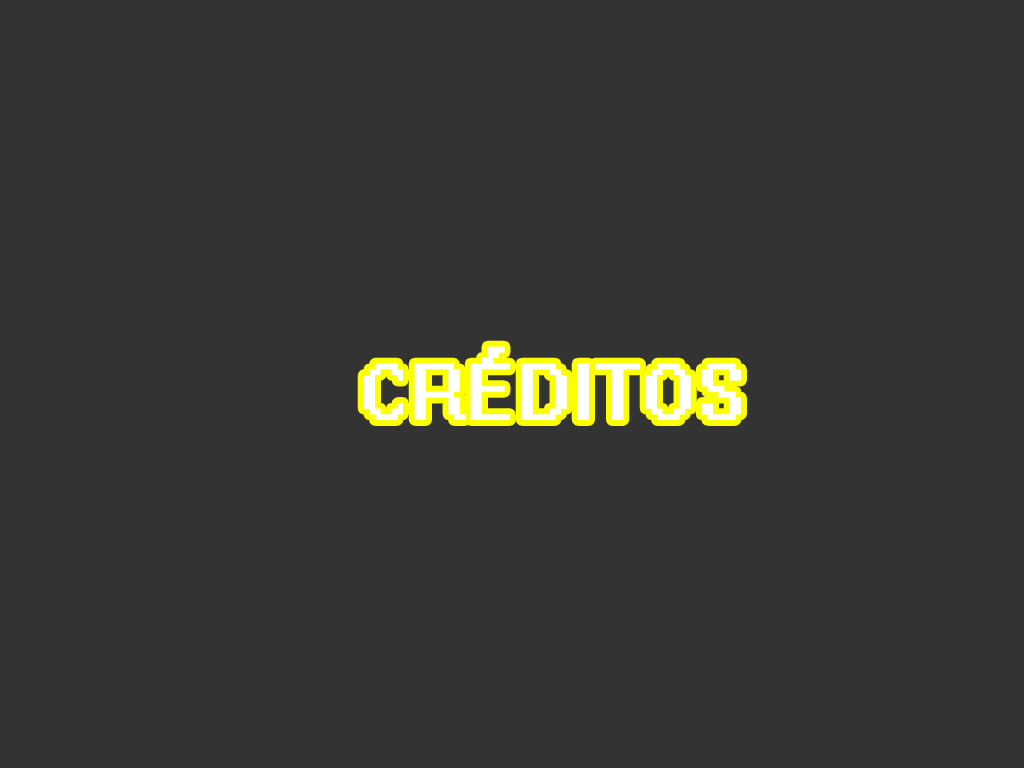
<style>
.page{position:relative;width:1024px;height:768px;background:#333333}
.page>*{position:absolute;margin:0}
.t1{font:72px "System";color:#ffffff}
</style>
<div class="page">
<p class="t1" style="left:363px;top:346px;width:378px;height:74px">CRÉDITOS</p>
</div>
